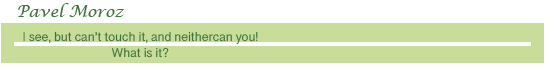
<style>
.page{position:relative;width:550px;height:74px;background:#ffffff}
.page>*{position:absolute;margin:0}
.t1{font:15.7px "LucidaCalligraphy-Italic";color:#3d743d}
.t2{font:13.1px "MalayalamSangamMN";color:#3d743d}
</style>
<div class="page">
<p class="t1" style="left:18px;top:3px;width:106px;height:14px">Pavel Moroz</p>
<p class="t2" style="left:23px;top:31px;width:235px;height:27px;text-align:center">I see, but can’t touch it, and neither can you!<br>What is it?</p>
</div>
